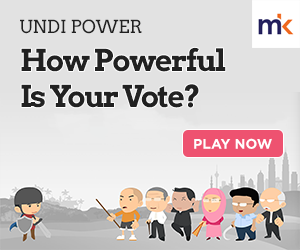
<style>
.page{position:relative;width:300px;height:250px;background:#e2e2e2}
.page>*{position:absolute;margin:0}
.t1{font:18px "Arvo";color:#212121}
.t2{font:30px "Arvo-Bold";letter-spacing:-0.05em;color:#212121}
.t3{font:14px "Gotham-Bold";color:#ffffff}
</style>
<div class="page">
<p class="t1" style="left:20px;top:19px;width:122px;height:15px">UNDI POWER</p>
<p class="t2" style="left:21px;top:47px;width:205px;height:61px">How Powerful<br>Is Your Vote?</p>
<p class="t3" style="left:194px;top:138px;width:78px;height:11px">PLAY NOW</p>
</div>
